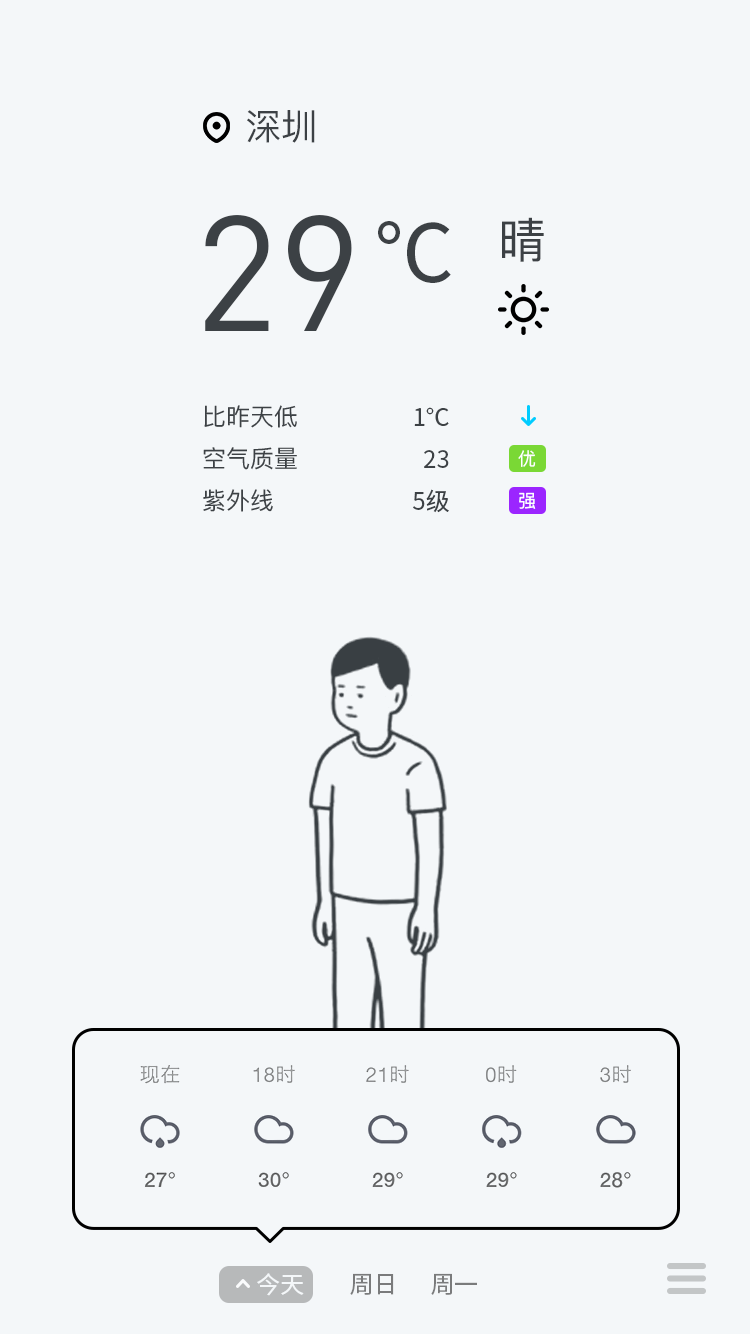
<style>
.page{position:relative;width:750px;height:1334px;background:#f4f7f9}
.page>*{position:absolute;margin:0}
.t1{font:36px "PingFangSC-Regular";color:#3c4145}
.t2{font:161.3px "DIN-Regular";color:#3c4145}
.t3{font:79.9px "NotoSansHans-Regular";color:#3c4145}
.t4{font:48px "PingFangSC-Regular";color:#3c4145}
.t5{font:24px "PingFangSC-Regular";color:#3c4145}
.t6{font:24px "NotoSansHans-Regular";color:#3c4145}
.t7{font:18px "PingFangSC-Regular";color:#ffffff}
.t8{font:24px "NotoSansHans-Regular";color:#f4f7f9}
.t9{font:24px "NotoSansHans-Regular";color:#7a7b7c}
</style>
<div class="page">
<p class="t1" style="left:247px;top:110px;width:68px;height:33px">深圳</p>
<p class="t2" style="left:205px;top:215px;width:147px;height:116px">29</p>
<p class="t3" style="left:378px;top:221px;width:73px;height:62px">℃</p>
<p class="t4" style="left:502px;top:217px;width:42px;height:45px">晴</p>
<p class="t5" style="left:203px;top:405px;width:94px;height:107px">比昨天低<br>空气质量<br>紫外线</p>
<p class="t6" style="left:413px;top:407px;width:36px;height:106px;text-align:right">1℃<br>23<br>5级</p>
<p class="t7" style="left:518px;top:450px;width:18px;height:17px">优</p>
<p class="t7" style="left:519px;top:492px;width:17px;height:17px">强</p>
<p class="t8" style="left:257px;top:1273px;width:47px;height:23px">今天</p>
<p class="t9" style="left:350px;top:1273px;width:44px;height:22px">周日</p>
<p class="t9" style="left:431px;top:1273px;width:46px;height:22px">周一</p>
</div>
